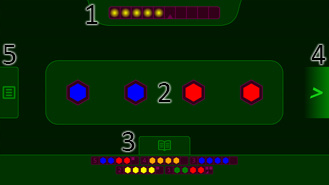
<style>
.page{position:relative;width:329px;height:185px;background:#003300}
.page>*{position:absolute;margin:0}
.t1{font:30px "Calibri";color:#000000}
</style>
<div class="page">
<p class="t1" style="left:86px;top:5px;width:12px;height:19px">1</p>
<p class="t1" style="left:3px;top:45px;width:13px;height:19px">5</p>
<p class="t1" style="left:311px;top:45px;width:15px;height:19px">4</p>
<p class="t1" style="left:158px;top:83px;width:13px;height:19px">2</p>
<p class="t1" style="left:122px;top:132px;width:13px;height:19px">3</p>
</div>
